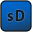
<style>
.page{position:relative;width:32px;height:32px}
.page>*{position:absolute;margin:0}
.t1{font:15px "MyriadPro-Bold";letter-spacing:0.075em;color:#1f2933}
</style>
<div class="page">
<p class="t1" style="left:7px;top:10px;width:18px;height:11px">sD</p>
</div>
